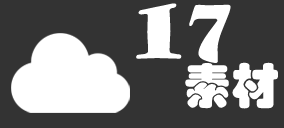
<style>
.page{position:relative;width:284px;height:128px;background:#333333}
.page>*{position:absolute;margin:0}
.t1{font:72px "GoudyStout";color:#ffffff;scale:0.86 1}
.t2{font:48px "STHupo";color:#ffffff}
</style>
<div class="page">
<p class="t1" style="left:136px;top:3px;width:95px;height:60px">17</p>
<p class="t2" style="left:185px;top:62px;width:93px;height:47px">素材</p>
</div>
